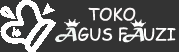
<style>
.page{position:relative;width:179px;height:52px;background:#333333}
.page>*{position:absolute;margin:0}
.t1{font:16.7px "ComicSansMS";color:#fbf7f7}
.t2{font:16.7px "MaturaMTScriptCapitals";color:#f2f7f4}
.t3{font:16.7px "ComicSansMS";color:#fffefe}
.t4{font:16.7px "MaturaMTScriptCapitals";color:#fafcfb}
</style>
<div class="page">
<p class="t1" style="left:88px;top:7px;width:48px;height:15px">TOKO</p>
<p class="t2" style="left:55px;top:27px;width:22px;height:15px">A</p>
<p class="t3" style="left:78px;top:27px;width:98px;height:15px">GUS F   UZI</p>
<p class="t4" style="left:122px;top:27px;width:23px;height:16px">A</p>
</div>
